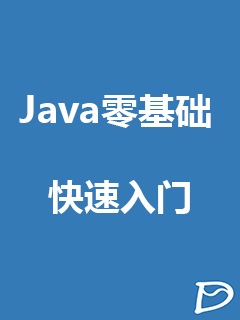
<style>
.page{position:relative;width:240px;height:320px;background:#337ab7}
.page>*{position:absolute;margin:0}
.t1{font:36px "MicrosoftYaHei-Bold";color:#ffffff;scale:1.03 1}
.t2{font:36px "MicrosoftYaHei-Bold";color:#ffffff}
</style>
<div class="page">
<p class="t1" style="left:19px;top:94px;width:192px;height:34px">Java零基础</p>
<p class="t2" style="left:48px;top:180px;width:142px;height:34px">快速入门</p>
</div>
